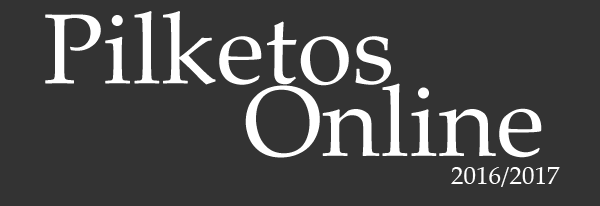
<style>
.page{position:relative;width:600px;height:206px;background:#333333}
.page>*{position:absolute;margin:0}
.t1{font:100px "PalatinoLinotype-Roman";color:#ffffff}
.t2{font:25px "PalatinoLinotype-Roman";color:#ffffff}
</style>
<div class="page">
<p class="t1" style="left:45px;top:11px;width:346px;height:75px">Pilketos</p>
<p class="t1" style="left:245px;top:83px;width:297px;height:75px">Online</p>
<p class="t2" style="left:451px;top:167px;width:109px;height:20px">2016/2017</p>
</div>
